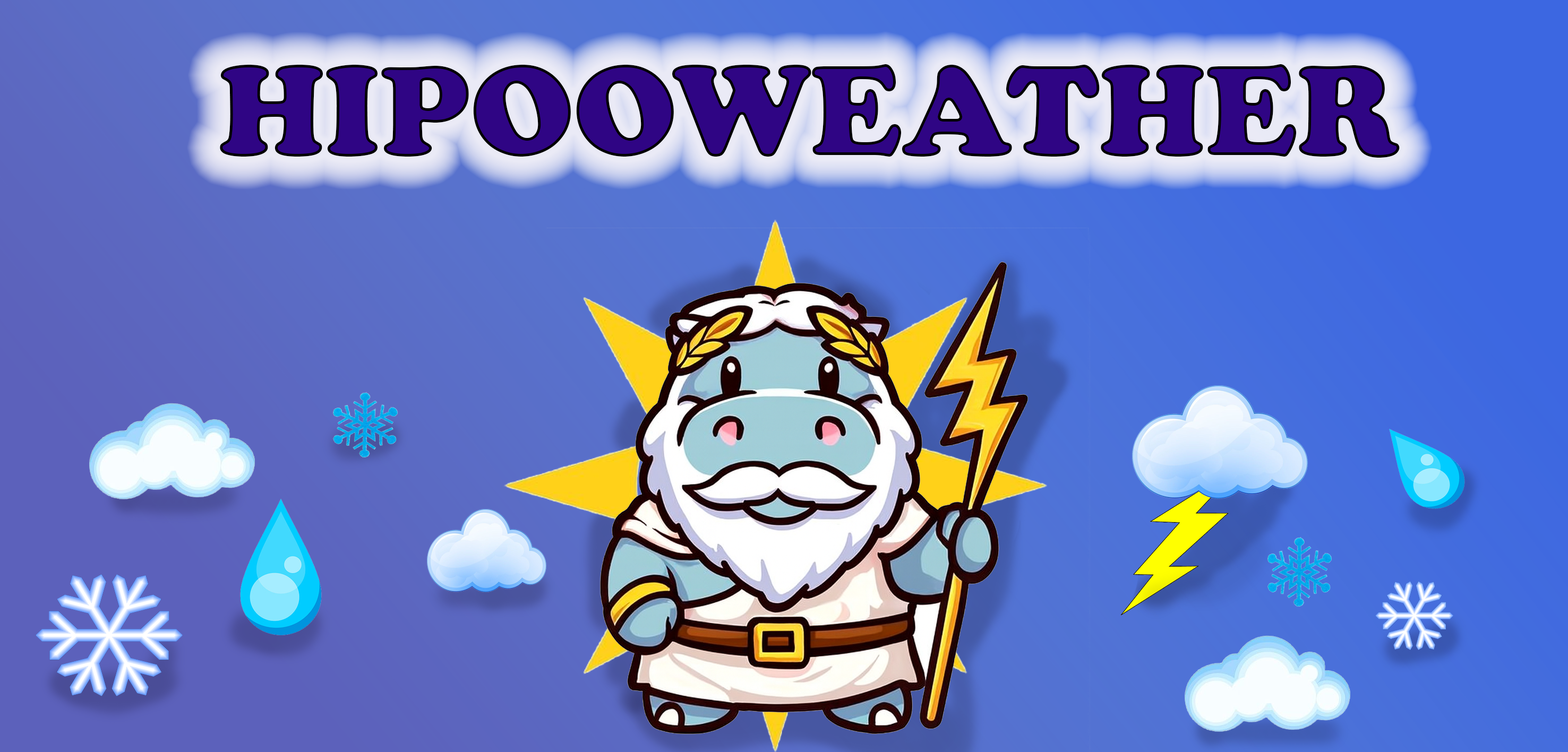
<style>
.page{position:relative;width:1568px;height:752px}
.page>*{position:absolute;margin:0}
.t1{font:132.7px "CooperBlack";color:#2f0584}
</style>
<div class="page">
<p class="t1" style="left:220px;top:64px;width:1180px;height:94px">HIPOOWEATHER</p>
</div>
